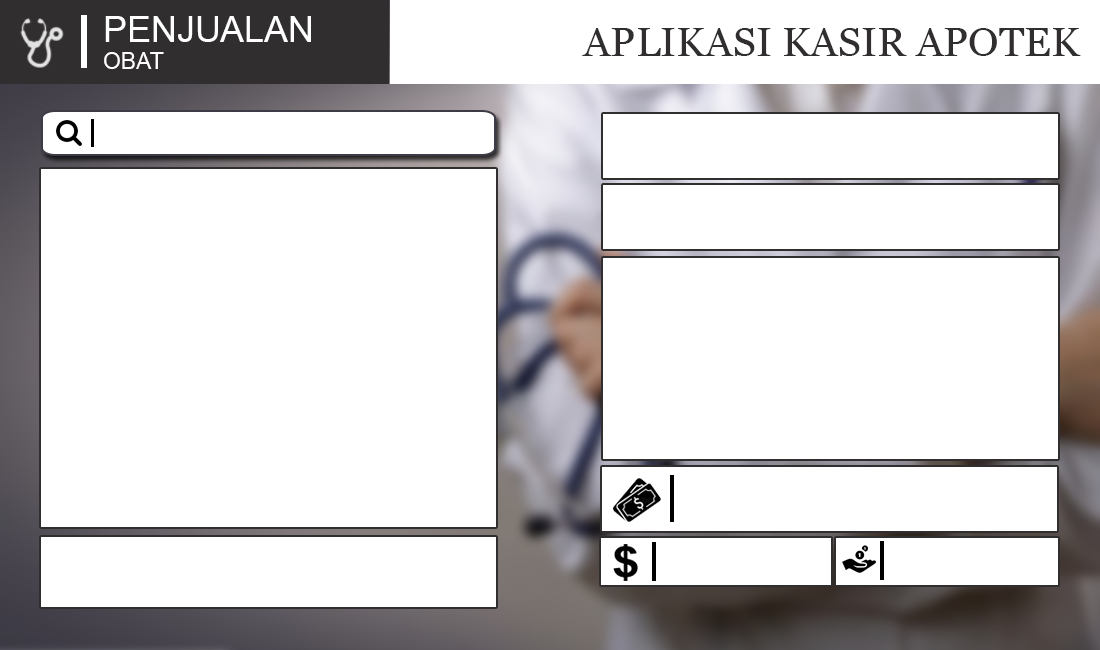
<style>
.page{position:relative;width:1100px;height:650px;background:#ffffff}
.page>*{position:absolute;margin:0}
.t1{font:36px "ArialMT";color:#ffffff}
.t2{font:23px "ArialMT";color:#ffffff}
.t3{font:40px "Georgia";color:#312e30}
</style>
<div class="page">
<p class="t1" style="left:104px;top:16px;width:207px;height:53px">PENJUALAN<br><span class="t2">OBAT</span></p>
<p class="t3" style="left:582px;top:28px;width:499px;height:28px">APLIKASI KASIR APOTEK</p>
</div>
